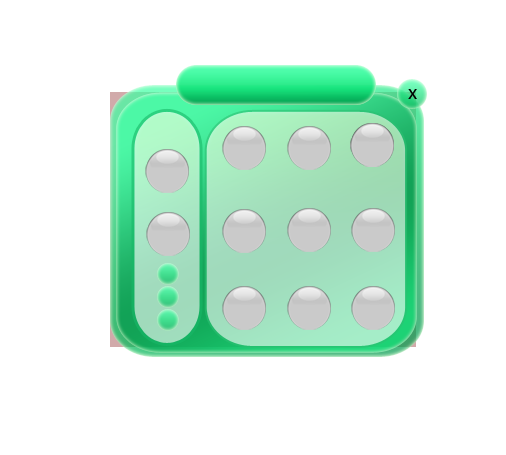
<style>
.page{position:relative;width:506px;height:455px;background:#ffffff}
.page>*{position:absolute;margin:0}
.t1{font:20px "MyriadPro-Regular";color:#000000}
</style>
<div class="page">
<p class="t1" style="left:408px;top:89px;width:9px;height:10px">x</p>
</div>
